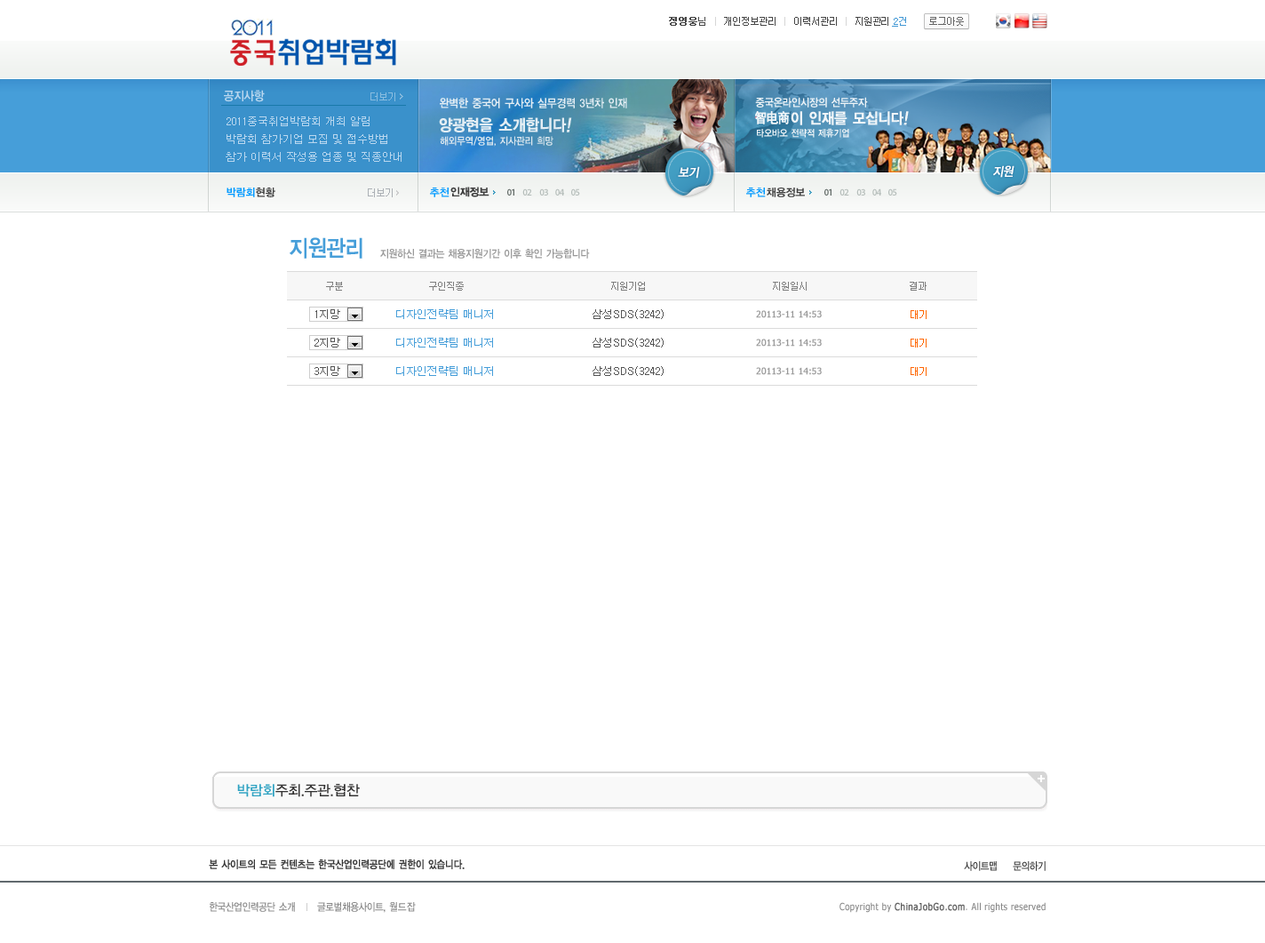
<style>
.page{position:relative;width:1265px;height:943px;background:#ffffff}
.page>*{position:absolute;margin:0}
.t1{font:9.8px "Dotum";letter-spacing:-0.1em;color:#464646}
.t2{font:9.8px "Dotum";letter-spacing:-0.1em;color:#464646;font-weight:bold}
.t3{font:9.8px "Dotum";letter-spacing:-0.1em;color:#d6d6d6}
.t4{font:9.8px "Dotum";color:#4298d5;text-decoration:underline}
.t5{font:9.8px "Dotum";color:#4298d5}
.t6{font:12.4px "YDIYGO140-KSCpc-EUC-H";letter-spacing:-0.1em;color:#b9d7ef;scale:0.9 1}
.t7{font:11.7px "YDIYGO140-KSCpc-EUC-H";letter-spacing:-0.1em;color:#e4eef4;scale:0.9 1}
.t8{font:11.1px "YDIYGO140-KSCpc-EUC-H";letter-spacing:-0.1em;color:#f0f5f8;scale:0.9 1}
.t9{font:13.8px "SimHei";letter-spacing:-0.1em;color:#f0f5f8;font-weight:bold;scale:0.9 1}
.t10{font:15.2px "YDIYGO140-KSCpc-EUC-H";letter-spacing:-0.1em;color:#f0f5f8;font-weight:bold;scale:0.9 1}
.t11{font:15.2px "YDIYGO140-KSCpc-EUC-H";letter-spacing:-0.1em;color:#f0f5f8;font-weight:bold;font-style:italic;scale:0.9 1}
.t12{font:10.7px/17.8px "Dotum";color:#b9d7ef}
.t13{font:16.1px "YDIYGO140-KSCpc-EUC-H";letter-spacing:-0.1em;color:#e4eef4;font-weight:bold;scale:0.9 1}
.t14{font:16.1px "YDIYGO140-KSCpc-EUC-H";letter-spacing:-0.1em;color:#e4eef4;font-weight:bold;font-style:italic;scale:0.9 1}
.t15{font:10.3px "YDIYGO140-KSCpc-EUC-H";letter-spacing:-0.1em;color:#dde8ef;scale:0.9 1}
.t16{font:9.7px "YDIYGO140-KSCpc-EUC-H";letter-spacing:-0.1em;color:#f0f5f8;scale:0.9 1}
.t17{font:12.4px "YDIYGO130-KSCpc-EUC-H";letter-spacing:-0.1em;color:#ffffff;font-weight:bold;font-style:italic;scale:0.9 1}
.t18{font:10.7px "YDIYGO140-KSCpc-EUC-H";letter-spacing:-0.1em;color:#0099ff}
.t19{font:10.7px "YDIYGO140-KSCpc-EUC-H";letter-spacing:-0.1em;color:#3e3e3e}
.t20{font:23.1px "YDIYGO140-KSCpc-EUC-H";letter-spacing:-0.1em;color:#469ed9;scale:0.9 1}
.t21{font:10.7px "YDIYGO140-KSCpc-EUC-H";letter-spacing:-0.1em;color:#999999;scale:0.9 1}
.t22{font:9.8px "Dotum";letter-spacing:-0.1em;color:#7d7d7d}
.t23{font:10.7px "Dotum";color:#555555}
.t24{font:10.7px "Dotum";color:#469ed9}
.t25{font:8.9px "Tahoma";color:#999999;font-weight:bold}
.t26{font:9.8px "Dotum";letter-spacing:-0.1em;color:#ff6600}
.t27{font:14.2px "YDIYGO130-KSCpc-EUC-H";letter-spacing:-0.1em;color:#323131}
.t28{font:14.2px "YDIYGO130-KSCpc-EUC-H";letter-spacing:-0.1em;color:#2ea2c2}
.t29{font:10.7px "YDIYGO130-KSCpc-EUC-H";letter-spacing:-0.1em;color:#373737;font-weight:bold;scale:0.86 1}
.t30{font:10.7px "YDIYGO130-KSCpc-EUC-H";letter-spacing:-0.1em;color:#373737;scale:0.86 1}
.t31{font:10.7px "YDIYGO130-KSCpc-EUC-H";letter-spacing:-0.1em;color:#868686;scale:0.86 1}
.t32{font:10.7px "YDIYGO130-KSCpc-EUC-H";letter-spacing:-0.05em;color:#868686;scale:0.86 1}
.t33{font:9.8px "Tahoma";letter-spacing:0.05em;color:#868686;scale:0.86 1}
.t34{font:9.8px "Tahoma";letter-spacing:0.05em;color:#626262;font-weight:bold;scale:0.86 1}
</style>
<div class="page">
<p class="t1" style="left:669px;top:17px;width:290px;height:9px"><span class="t2">정영웅</span>님   <span class="t3">| </span>  개인정보관리   <span class="t3">| </span>  이력서관리   <span class="t3">|</span>   지원관리             로그아웃</p>
<p class="t4" style="left:892px;top:17px;width:14px;height:10px">2<span class="t5">건</span></p>
<p class="t6" style="left:224px;top:90px;width:41px;height:12px">공지사항</p>
<p class="t7" style="left:440px;top:98px;width:187px;height:10px">완벽한 중국어 구사와 실무경력 3년차 인재</p>
<p class="t8" style="left:755px;top:97px;width:113px;height:10px">중국온라인시장의 선두주자</p>
<p class="t9" style="left:755px;top:111px;width:35px;height:13px">智电商</p>
<p class="t10" style="left:791px;top:111px;width:118px;height:14px">이 인재를 모십니다<span class="t11">!</span></p>
<p class="t12" style="left:226px;top:116px;width:176px;height:46px">2011중국취업박람회 개최 알림<br>박람회 참가기업 모집 및 접수방법<br>참가 이력서 작성용 업종 및 직종안내</p>
<p class="t13" style="left:439px;top:117px;width:133px;height:15px">양광현을 소개합니다<span class="t14">!</span></p>
<p class="t15" style="left:440px;top:136px;width:113px;height:11px">해외무역/영업, 지사관리 희망</p>
<p class="t16" style="left:757px;top:128px;width:92px;height:10px">타오바오 전략적 제휴기업</p>
<p class="t17" style="left:678px;top:166px;width:22px;height:13px">보기</p>
<p class="t17" style="left:993px;top:165px;width:22px;height:13px">지원</p>
<p class="t18" style="left:227px;top:187px;width:28px;height:10px">박람회</p>
<p class="t19" style="left:256px;top:187px;width:19px;height:10px">현황</p>
<p class="t18" style="left:430px;top:187px;width:20px;height:10px">추천</p>
<p class="t19" style="left:450px;top:187px;width:40px;height:10px">인재정보</p>
<p class="t18" style="left:746px;top:187px;width:20px;height:10px">추천</p>
<p class="t19" style="left:767px;top:187px;width:38px;height:10px">채용정보</p>
<p class="t20" style="left:290px;top:237px;width:72px;height:22px">지원관리</p>
<p class="t21" style="left:380px;top:249px;width:210px;height:10px">지원하신 결과는 채용지원기간 이후 확인 가능합니다</p>
<p class="t22" style="left:326px;top:282px;width:17px;height:9px">구분</p>
<p class="t22" style="left:429px;top:282px;width:35px;height:9px">구인직종</p>
<p class="t22" style="left:611px;top:282px;width:34px;height:9px">지원기업</p>
<p class="t22" style="left:773px;top:282px;width:34px;height:9px">지원일시</p>
<p class="t22" style="left:910px;top:282px;width:17px;height:9px">결과</p>
<p class="t23" style="left:315px;top:309px;width:25px;height:10px">1지망</p>
<p class="t24" style="left:396px;top:309px;width:97px;height:10px">디자인전략팀 매니저</p>
<p class="t23" style="left:593px;top:309px;width:71px;height:10px">삼성SDS(3242)</p>
<p class="t25" style="left:756px;top:310px;width:66px;height:8px">20113-11 14:53</p>
<p class="t26" style="left:911px;top:310px;width:16px;height:9px">대기</p>
<p class="t23" style="left:314px;top:338px;width:26px;height:9px">2지망</p>
<p class="t24" style="left:396px;top:338px;width:97px;height:9px">디자인전략팀 매니저</p>
<p class="t23" style="left:593px;top:338px;width:71px;height:9px">삼성SDS(3242)</p>
<p class="t25" style="left:756px;top:338px;width:66px;height:8px">20113-11 14:53</p>
<p class="t26" style="left:911px;top:338px;width:16px;height:9px">대기</p>
<p class="t23" style="left:314px;top:366px;width:26px;height:10px">3지망</p>
<p class="t24" style="left:396px;top:366px;width:97px;height:10px">디자인전략팀 매니저</p>
<p class="t23" style="left:593px;top:366px;width:71px;height:10px">삼성SDS(3242)</p>
<p class="t25" style="left:756px;top:367px;width:66px;height:8px">20113-11 14:53</p>
<p class="t26" style="left:911px;top:367px;width:16px;height:9px">대기</p>
<p class="t27" style="left:237px;top:784px;width:123px;height:13px"><span class="t28">박람회</span>주최.주관.협찬</p>
<p class="t29" style="left:209px;top:859px;width:256px;height:10px">본 사이트의 모든 컨텐츠는 한국산업인력공단에 권한이 있습니다.</p>
<p class="t30" style="left:964px;top:861px;width:33px;height:10px">사이트맵</p>
<p class="t30" style="left:1013px;top:861px;width:33px;height:10px">문의하기</p>
<p class="t31" style="left:210px;top:902px;width:206px;height:10px">한국산업인력공단 소개      글로벌채용사이트, <span class="t32">월드잡</span></p>
<p class="t33" style="left:840px;top:902px;width:206px;height:10px">Copyright by <span class="t34">ChinaJobGo.com</span>. All rights reserved</p>
</div>
